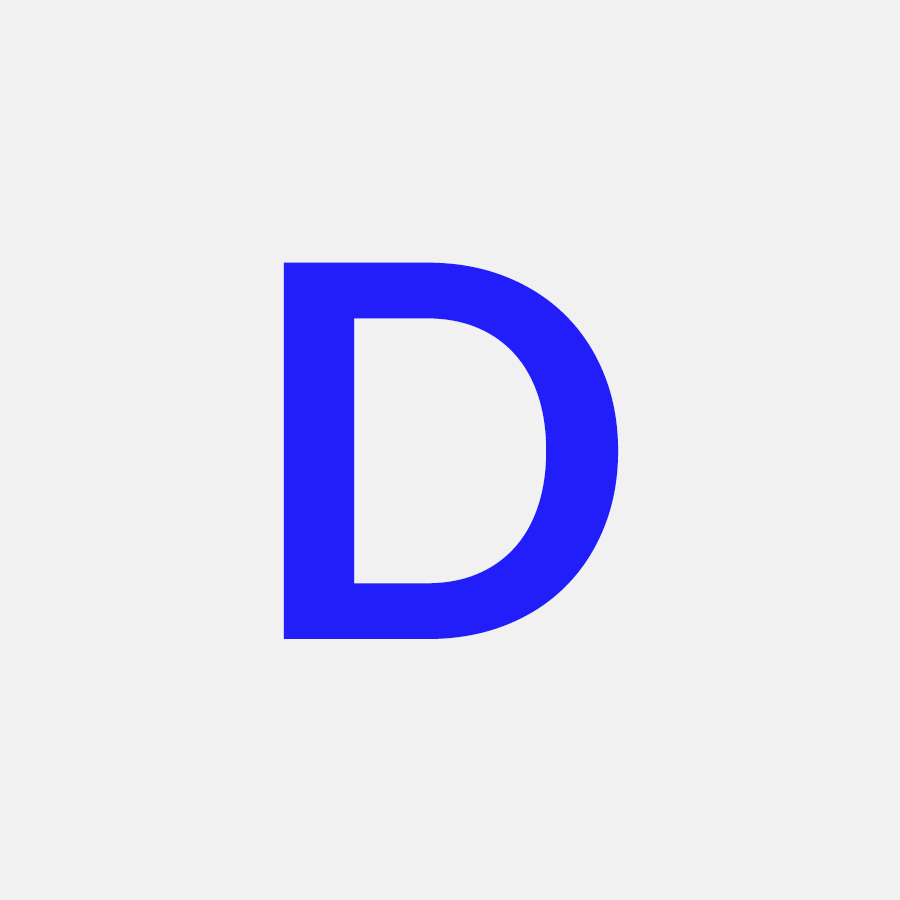
<style>
.page{position:relative;width:900px;height:900px;background:#f1f1f1}
.page>*{position:absolute;margin:0}
.t1{font:520.5px "Lato-Bold";letter-spacing:0.04em;color:#211ef9}
</style>
<div class="page">
<p class="t1" style="left:283px;top:262px;width:336px;height:377px">D</p>
</div>
